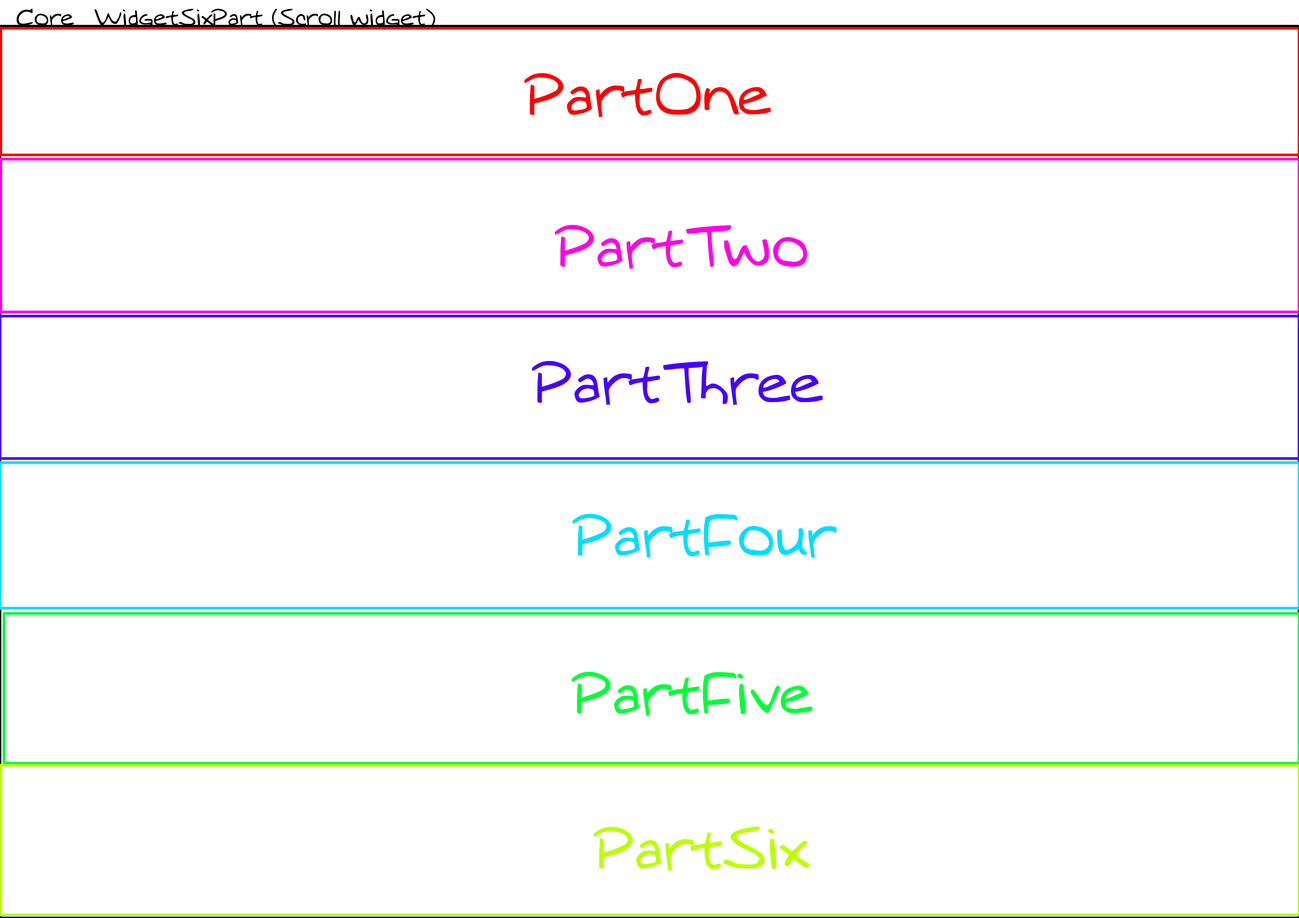
<style>
.page{position:relative;width:1299px;height:918px;background:#ffffff}
.page>*{position:absolute;margin:0}
.t1{font:21.8px "MTOaugie-Regular";color:#000000}
.t2{font:54.5px "MTOaugie-Regular";color:#ff0000}
.t3{font:54.5px "MTOaugie-Regular";color:#ff00e4}
.t4{font:54.5px "MTOaugie-Regular";color:#4800ff}
.t5{font:54.5px "MTOaugie-Regular";color:#00deff}
.t6{font:54.5px "MTOaugie-Regular";color:#00ff36}
.t7{font:54.5px "MTOaugie-Regular";color:#baff00}
</style>
<div class="page">
<p class="t1" style="left:16px;top:8px;width:419px;height:19px">Core_WidgetSixPart (Scroll widget)</p>
<p class="t2" style="left:524px;top:73px;width:247px;height:44px">PartOne</p>
<p class="t3" style="left:555px;top:225px;width:252px;height:44px">PartTwo</p>
<p class="t4" style="left:532px;top:361px;width:290px;height:44px">PartThree</p>
<p class="t5" style="left:572px;top:514px;width:264px;height:44px">PartFour</p>
<p class="t6" style="left:571px;top:672px;width:241px;height:44px">PartFive</p>
<p class="t7" style="left:593px;top:827px;width:217px;height:44px">PartSix</p>
</div>
